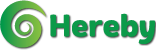
<style>
.page{position:relative;width:156px;height:55px;background:#ffffff}
.page>*{position:absolute;margin:0}
.t1{font:30px "EigerdalsBlack";letter-spacing:0.01em;color:#0b9a49}
</style>
<div class="page">
<p class="t1" style="left:50px;top:13px;width:105px;height:31px">Hereby</p>
</div>
